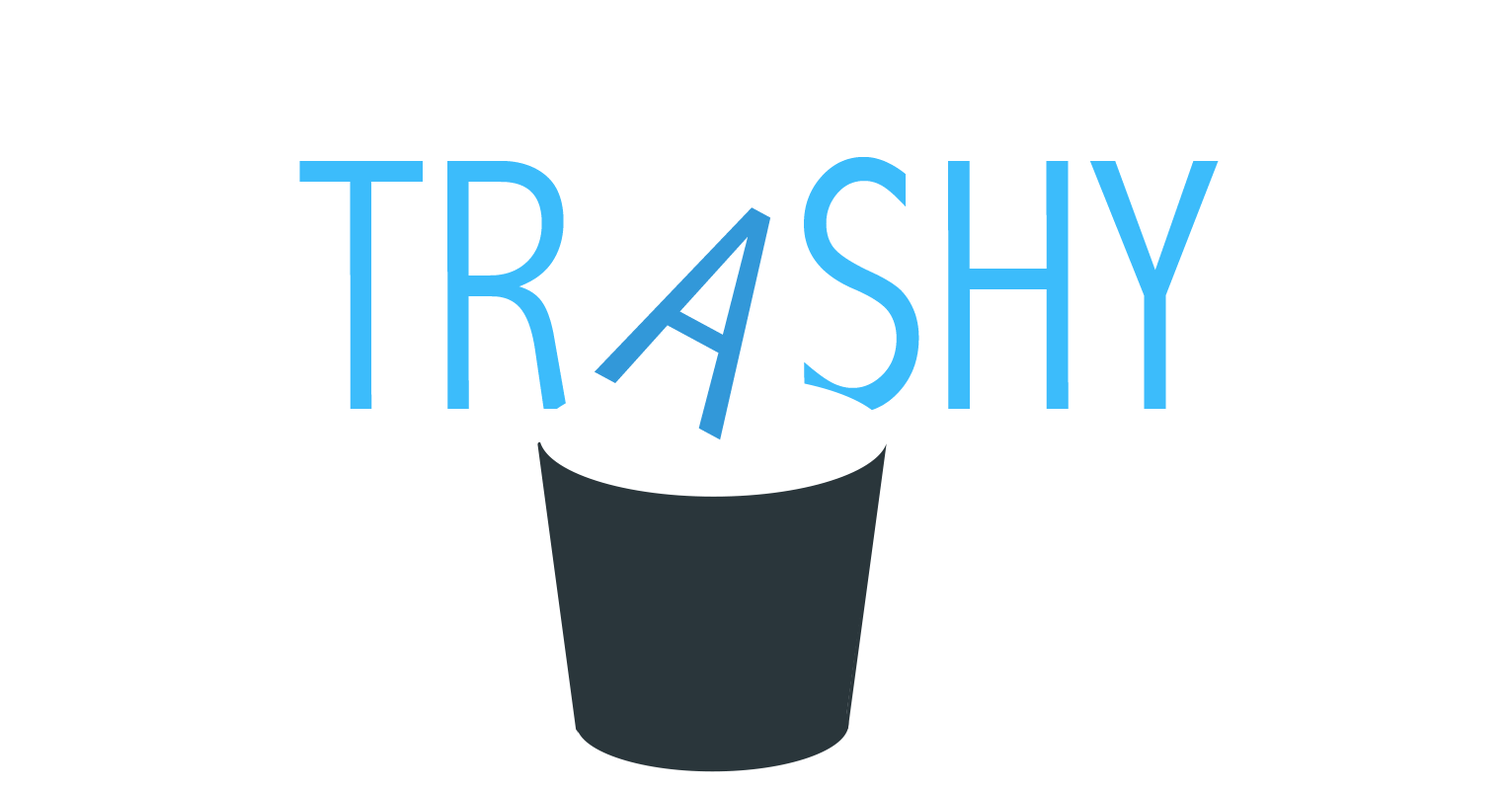
<style>
.page{position:relative;width:1510px;height:790px;background:#ffffff}
.page>*{position:absolute;margin:0}
.t1{font:363px "AbadiMT-CondensedLight";color:#3cbcfb;scale:0.89 1}
.t2{font:321.3px "AbadiMT-CondensedLight";color:#3298d9}
</style>
<div class="page">
<p class="t1" style="left:299px;top:157px;width:919px;height:256px">TR   SHY</p>
<p class="t2" style="left:594px;top:207px;width:176px;height:233px;rotate:28deg">A</p>
</div>
